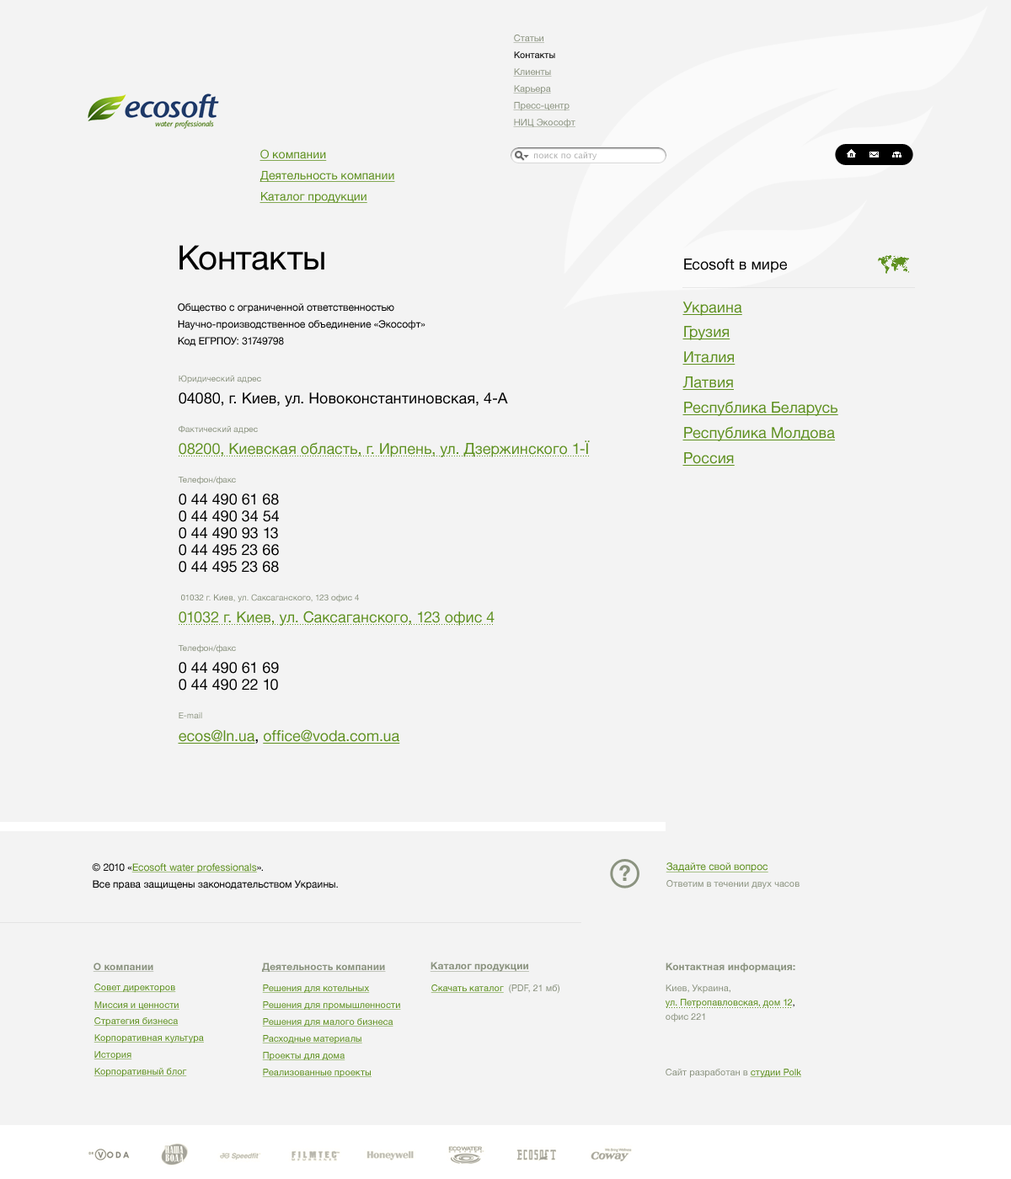
<style>
.page{position:relative;width:1011px;height:1179px;background:#f3f3f3}
.page>*{position:absolute;margin:0}
.t1{font:9.3px "HelveticaNeue";color:#8b9380;text-decoration:underline}
.t2{font:9.3px "HelveticaNeue";color:#000000}
.t3{font:11.8px "HelveticaNeue";color:#5e901f;text-decoration:underline}
.t4{font:8.4px "LucidaGrande";color:#b2b2b2}
.t5{font:33.7px "HelveticaNeue";color:#000000}
.t6{font:15.2px "HelveticaNeue";color:#000000}
.t7{font:10.1px/16.8px "HelveticaNeue";color:#000000}
.t8{font:15.2px "HelveticaNeue";color:#5e901f;text-decoration:underline}
.t9{font:15.2px/25.3px "HelveticaNeue";color:#5e901f;text-decoration:underline}
.t10{font:8.4px "HelveticaNeue";color:#8b9380}
.t11{font:15.2px "HelveticaNeue";color:#5e901f}
.t12{font:15.2px/16.8px "HelveticaNeue";color:#000000}
.t13{font:10.1px/16.8px "HelveticaNeue";color:#5e901f;text-decoration:underline}
.t14{font:10.1px "HelveticaNeue";color:#5e901f;text-decoration:underline}
.t15{font:9.3px "HelveticaNeue";color:#8b9380}
.t16{font:10.1px "HelveticaNeue-Bold";color:#8b9380;text-decoration:underline}
.t17{font:9.3px/14.3px "HelveticaNeue";color:#5e901f}
.t18{font:10.1px/16.8px "HelveticaNeue-Bold";color:#8b9380}
.t19{font:9.3px/21.1px "HelveticaNeue";color:#8b9380}
.t20{font:9.3px/14.3px "HelveticaNeue";color:#000000}
.t21{font:9.3px/14.3px "HelveticaNeue";color:#8b9380}
.t22{font:9.3px "HelveticaNeue";color:#5e901f;text-decoration:underline}
</style>
<div class="page">
<p class="t1" style="left:513px;top:35px;width:31px;height:8px">Статьи</p>
<p class="t2" style="left:514px;top:51px;width:41px;height:7px">Контакты</p>
<p class="t1" style="left:513px;top:68px;width:39px;height:9px">Клиенты</p>
<p class="t1" style="left:513px;top:85px;width:38px;height:9px">Карьера</p>
<p class="t1" style="left:513px;top:102px;width:57px;height:9px">Пресс-центр</p>
<p class="t1" style="left:513px;top:119px;width:62px;height:9px">НИЦ Экософт</p>
<p class="t3" style="left:259px;top:149px;width:68px;height:12px">О компании</p>
<p class="t4" style="left:534px;top:152px;width:63px;height:8px">поиск по сайту</p>
<p class="t3" style="left:259px;top:171px;width:136px;height:11px">Деятельность компании</p>
<p class="t3" style="left:259px;top:192px;width:108px;height:11px">Каталог продукции</p>
<p class="t5" style="left:179px;top:245px;width:145px;height:25px">Контакты</p>
<p class="t6" style="left:684px;top:259px;width:103px;height:14px">Ecosoft в мире</p>
<p class="t7" style="left:178px;top:303px;width:247px;height:43px">Общество с ограниченной ответственностью<br>Научно-производственное объединение «Экософт»<br>Код ЕГРПОУ: 31749798</p>
<p class="t8" style="left:682px;top:302px;width:60px;height:14px">Украина</p>
<p class="t9" style="left:682px;top:326px;width:156px;height:140px">Грузия<br>Италия<br>Латвия<br>Республика Беларусь<br>Республика Молдова<br>Россия</p>
<p class="t10" style="left:179px;top:375px;width:82px;height:8px">Юридический адрес</p>
<p class="t6" style="left:179px;top:393px;width:329px;height:14px">04080, г. Киев, ул. Новоконстантиновская, 4-А</p>
<p class="t10" style="left:179px;top:425px;width:79px;height:9px">Фактический адрес</p>
<p class="t11" style="left:179px;top:441px;width:411px;height:16px">08200, Киевская область, г. Ирпень, ул. Дзержинского 1-Ї</p>
<p class="t10" style="left:178px;top:476px;width:58px;height:8px">Телефон/факс</p>
<p class="t12" style="left:179px;top:494px;width:100px;height:79px">0 44 490 61 68<br>0 44 490 34 54<br>0 44 490 93 13<br>0 44 495 23 66<br>0 44 495 23 68</p>
<p class="t10" style="left:181px;top:594px;width:178px;height:8px">01032 г. Киев, ул. Саксаганского, 123 офис 4</p>
<p class="t11" style="left:179px;top:611px;width:316px;height:15px">01032 г. Киев, ул. Саксаганского, 123 офис 4</p>
<p class="t10" style="left:178px;top:645px;width:58px;height:8px">Телефон/факс</p>
<p class="t12" style="left:179px;top:662px;width:100px;height:29px">0 44 490 61 69<br>0 44 490 22 10</p>
<p class="t10" style="left:179px;top:712px;width:23px;height:7px">E-mail</p>
<p class="t8" style="left:178px;top:730px;width:222px;height:14px">ecos@ln.ua<span class="t6">, </span>office@voda.com.ua</p>
<p class="t7" style="left:92px;top:864px;width:246px;height:27px">© 2010 «<span class="t13">Ecosoft water professionals</span>».<br>Все права защищены законодательством Украины.</p>
<p class="t14" style="left:666px;top:863px;width:102px;height:10px">Задайте свой вопрос</p>
<p class="t15" style="left:666px;top:880px;width:134px;height:10px">Ответим в течении двух часов</p>
<p class="t16" style="left:93px;top:963px;width:61px;height:9px">О компании</p>
<p class="t16" style="left:261px;top:963px;width:125px;height:9px">Деятельность компании</p>
<p class="t16" style="left:430px;top:962px;width:99px;height:10px">Каталог продукции</p>
<p class="t17" style="left:665px;top:963px;width:130px;height:60px"><span class="t18">Контактная информация:<br></span><span class="t19">Киев, Украина,<br></span>ул. Петропавловская, дом 12<span class="t20">,<br></span><span class="t21">офис 221</span></p>
<p class="t22" style="left:94px;top:984px;width:82px;height:9px">Совет директоров</p>
<p class="t22" style="left:262px;top:985px;width:108px;height:8px">Решения для котельных</p>
<p class="t22" style="left:431px;top:985px;width:73px;height:8px">Скачать каталог</p>
<p class="t15" style="left:509px;top:985px;width:50px;height:9px">(PDF, 21 мб)</p>
<p class="t22" style="left:94px;top:1002px;width:85px;height:8px">Миссия и ценности</p>
<p class="t22" style="left:262px;top:1002px;width:139px;height:9px">Решения для промышленности</p>
<p class="t22" style="left:94px;top:1018px;width:85px;height:9px">Стратегия бизнеса</p>
<p class="t22" style="left:262px;top:1019px;width:131px;height:8px">Решения для малого бизнеса</p>
<p class="t22" style="left:94px;top:1035px;width:110px;height:9px">Корпоративная культура</p>
<p class="t22" style="left:262px;top:1035px;width:100px;height:10px">Расходные материалы</p>
<p class="t22" style="left:94px;top:1051px;width:38px;height:10px">История</p>
<p class="t22" style="left:262px;top:1052px;width:83px;height:10px">Проекты для дома</p>
<p class="t22" style="left:94px;top:1068px;width:93px;height:10px">Корпоративный блог</p>
<p class="t22" style="left:262px;top:1069px;width:110px;height:9px">Реализованные проекты</p>
<p class="t15" style="left:666px;top:1069px;width:135px;height:9px">Сайт разработан в <span class="t22">студии Polk</span></p>
</div>
